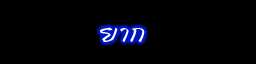
<style>
.page{position:relative;width:256px;height:64px;background:#000000}
.page>*{position:absolute;margin:0}
.t1{font:36px "DsSupasawatD";color:#ffffff}
</style>
<div class="page">
<p class="t1" style="left:100px;top:27px;width:45px;height:15px">ÂÒ¡</p>
</div>
